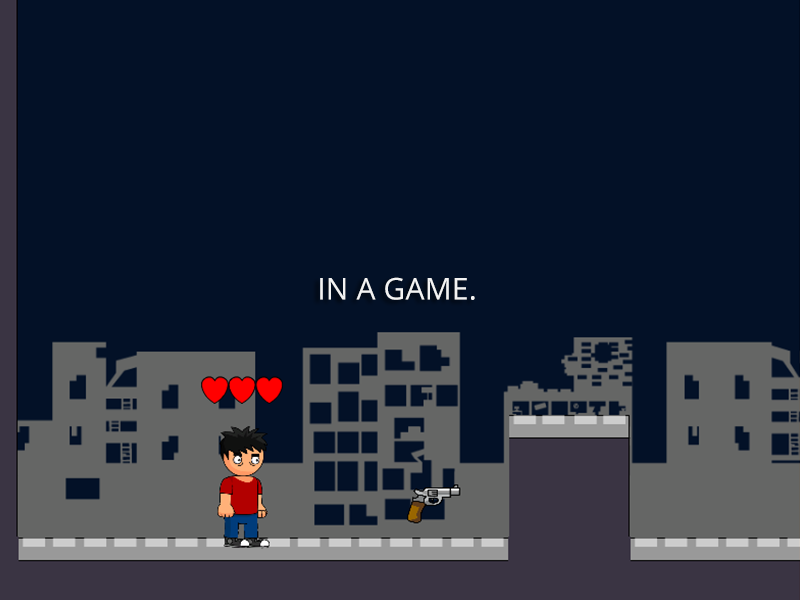
<style>
.page{position:relative;width:800px;height:600px;background:#031127}
.page>*{position:absolute;margin:0}
.t1{font:30px "OpenSans";letter-spacing:0.005em;color:#f3f3f3}
</style>
<div class="page">
<p class="t1" style="left:320px;top:277px;width:155px;height:23px">IN A GAME.</p>
</div>
